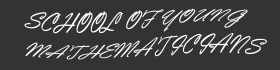
<style>
.page{position:relative;width:280px;height:70px;background:#333333}
.page>*{position:absolute;margin:0}
.t1{font:24px "VladimirScript";color:#ffffff;text-transform:uppercase}
</style>
<div class="page">
<p class="t1" style="left:24px;top:8px;width:243px;height:52px">School of Young <br>Mathematicians</p>
</div>
